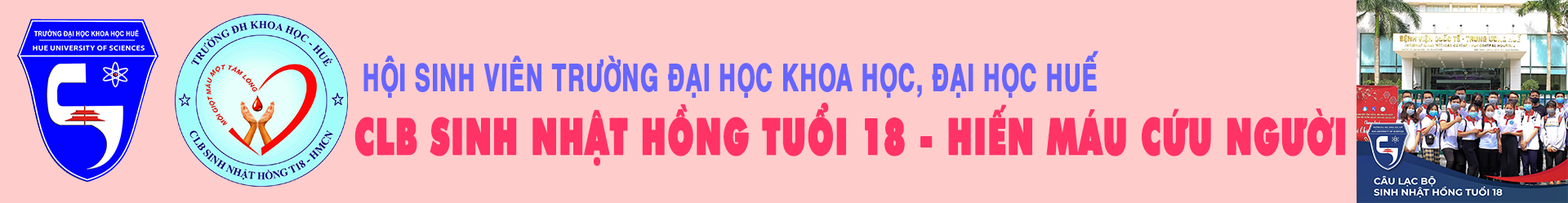
<style>
.page{position:relative;width:1568px;height:203px;background:#ffcccc}
.page>*{position:absolute;margin:0}
.t1{font:37.3px "UTMHelveBold";letter-spacing:0.02em;color:#6666ff;font-weight:bold;scale:0.61 1}
.t2{font:50.6px "UTM-Futura-Extra";letter-spacing:0.02em;color:#ff3366;font-weight:bold;scale:0.61 1}
</style>
<div class="page">
<p class="t1" style="left:363px;top:51px;width:735px;height:47px">HỘI SINH VIÊN TRƯỜNG ĐẠI HỌC KHOA HỌC, ĐẠI HỌC HUẾ</p>
<p class="t2" style="left:354px;top:102px;width:992px;height:65px"><span class="t1"><br></span>CLB SINH NHẬT HỒNG TUỔI 18 - HIẾN MÁU CỨU NGƯỜI</p>
</div>
